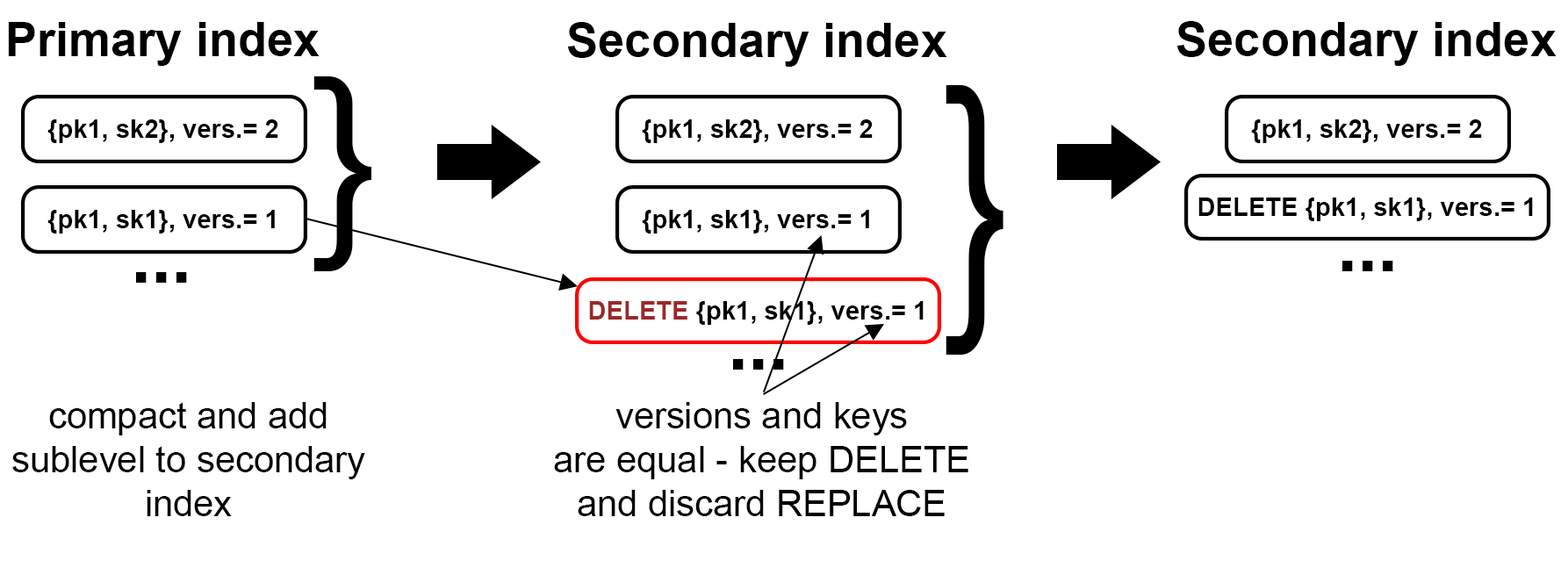
<style>
.page{position:relative;width:1568px;height:575px;background:#ffffff}
.page>*{position:absolute;margin:0}
.t1{font:47.6px "Arial-BoldMT";color:#000000}
.t2{font:219.5px "Avenir-Roman";color:#000000}
.t3{font:302.5px "Avenir-Roman";color:#000000;scale:0.72 1}
.t4{font:25.6px "Arial-BoldMT";color:#000000}
.t5{font:73.2px "Arial-BoldMT";color:#000000}
.t6{font:25.6px "Arial-BoldMT";color:#9b2929}
.t7{font:36.6px "ArialMT";color:#000000}
</style>
<div class="page">
<p class="t1" style="left:8px;top:22px;width:312px;height:44px">Primary index</p>
<p class="t1" style="left:568px;top:22px;width:379px;height:45px">Secondary index</p>
<p class="t1" style="left:1177px;top:21px;width:380px;height:45px">Secondary index</p>
<p class="t2" style="left:313px;top:76px;width:58px;height:195px">}</p>
<p class="t3" style="left:946px;top:85px;width:57px;height:270px">}</p>
<p class="t4" style="left:47px;top:119px;width:231px;height:24px">{pk1, sk2}, vers.= 2</p>
<p class="t4" style="left:642px;top:119px;width:231px;height:24px">{pk1, sk2}, vers.= 2</p>
<p class="t4" style="left:1251px;top:119px;width:231px;height:24px">{pk1, sk2}, vers.= 2</p>
<p class="t4" style="left:1198px;top:198px;width:335px;height:23px">DELETE {pk1, sk1}, vers.= 1</p>
<p class="t4" style="left:47px;top:210px;width:228px;height:24px">{pk1, sk1}, vers.= 1</p>
<p class="t4" style="left:642px;top:210px;width:227px;height:24px">{pk1, sk1}, vers.= 1</p>
<p class="t5" style="left:1342px;top:261px;width:51px;height:10px">...</p>
<p class="t5" style="left:136px;top:272px;width:51px;height:11px">...</p>
<p class="t4" style="left:589px;top:301px;width:335px;height:24px"><span class="t6">DELETE </span>{pk1, sk1}, vers.= 1</p>
<p class="t5" style="left:733px;top:359px;width:51px;height:11px">...</p>
<p class="t7" style="left:12px;top:402px;width:353px;height:114px;text-align:center">compact and add<br>sublevel to secondary<br>index</p>
<p class="t7" style="left:554px;top:402px;width:414px;height:114px;text-align:center">versions and keys<br>are equal - keep DELETE<br>and discard REPLACE</p>
</div>
